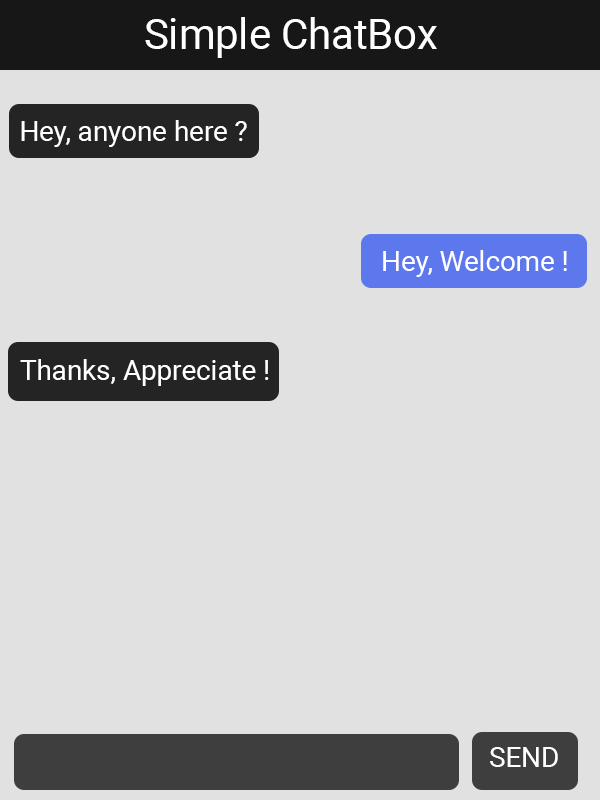
<style>
.page{position:relative;width:600px;height:800px;background:#e1e1e1}
.page>*{position:absolute;margin:0}
.t1{font:41.7px "Roboto-Regular";color:#ffffff}
.t2{font:27.8px "Roboto-Regular";color:#ffffff}
</style>
<div class="page">
<p class="t1" style="left:145px;top:17px;width:292px;height:41px">Simple ChatBox</p>
<p class="t2" style="left:21px;top:120px;width:226px;height:27px">Hey, anyone here ?</p>
<p class="t2" style="left:383px;top:250px;width:184px;height:27px">Hey, Welcome !</p>
<p class="t2" style="left:20px;top:359px;width:249px;height:27px">Thanks, Appreciate !</p>
<p class="t2" style="left:490px;top:747px;width:68px;height:20px">SEND</p>
</div>
